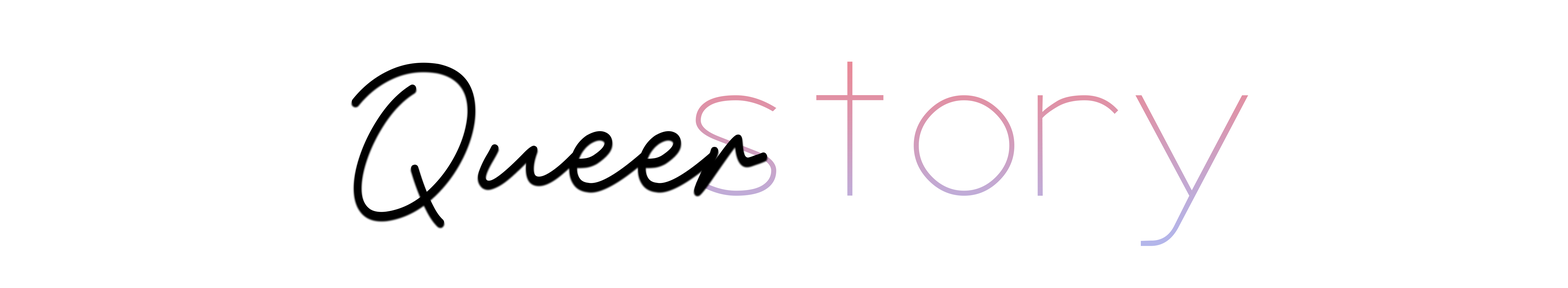
<style>
.page{position:relative;width:1568px;height:288px;background:#ffffff}
.page>*{position:absolute;margin:0}
.t1{font:238.4px "SoulOfYou";color:#000000}
.t2{font:214.6px "SecretCode"}
</style>
<div class="page">
<p class="t1" style="left:352px;top:63px;width:415px;height:163px">Queer</p>
<p class="t2" style="left:696px;top:62px;width:552px;height:184px">story</p>
</div>
